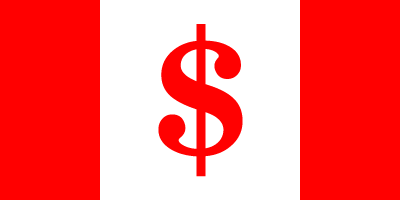
<style>
.page{position:relative;width:400px;height:200px;background:#ff0000}
.page>*{position:absolute;margin:0}
.t1{font:160px "NewCenturySchlbk-Bold";color:#ff0101}
</style>
<div class="page">
<p class="t1" style="left:158px;top:24px;width:85px;height:153px">$</p>
</div>
